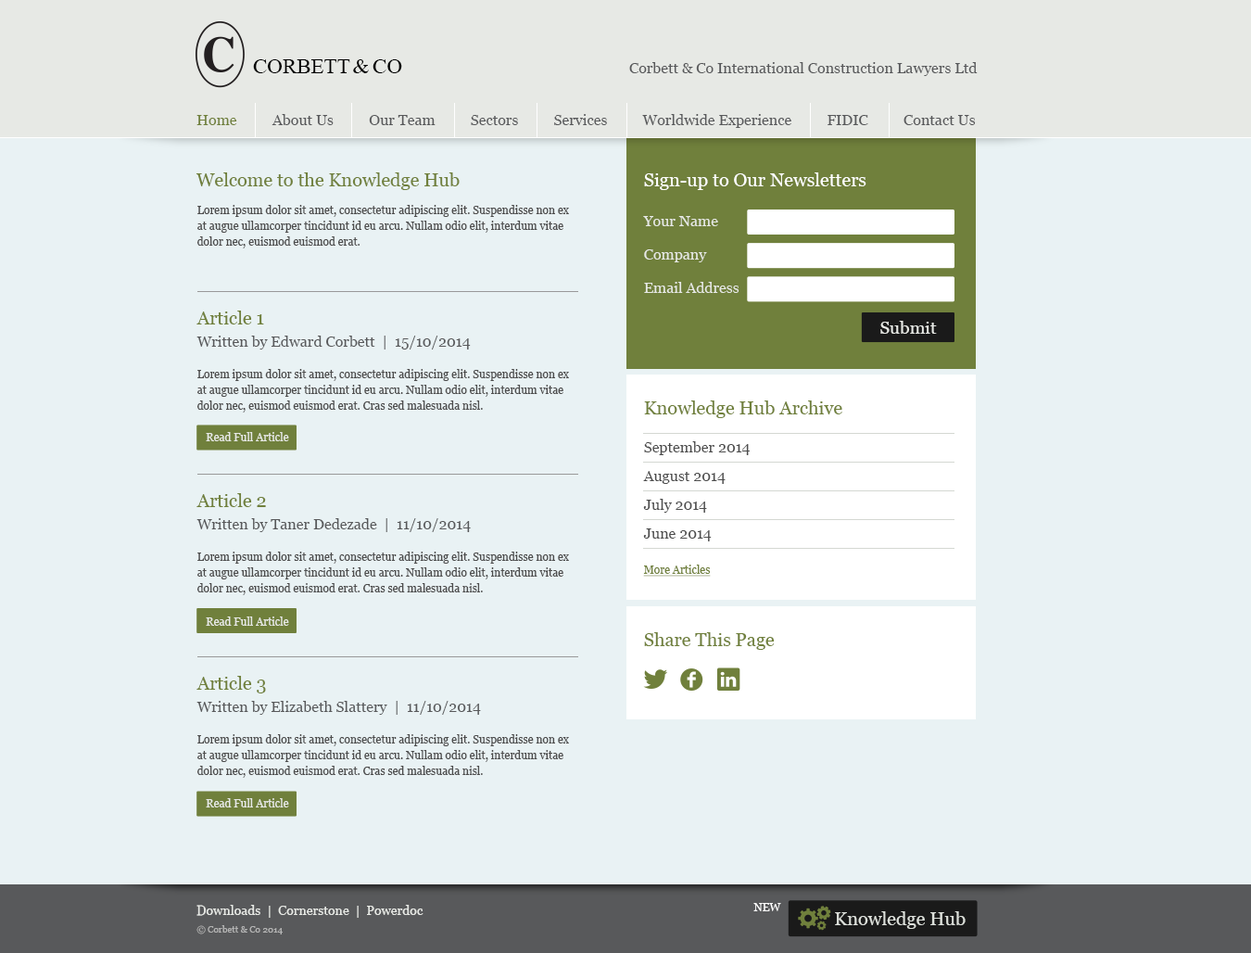
<style>
.page{position:relative;width:1251px;height:953px;background:#e9f2f4}
.page>*{position:absolute;margin:0}
.t1{font:21.3px "TimesNewRomanPSMT";color:#000000}
.t2{font:14.8px "Georgia";color:#58595b}
.t3{font:14.8px "Georgia";color:#70803c}
.t4{font:18.5px "Georgia";color:#70803c}
.t5{font:18.5px "Georgia";color:#ffffff}
.t6{font:11.1px/15.8px "Georgia";color:#4d4d4d}
.t7{font:14.8px/33.4px "Georgia";color:#e7e9e5}
.t8{font:17.6px "Georgia";color:#e7e9e5}
.t9{font:14.8px/28.7px "Georgia";color:#4d4d4d}
.t10{font:11.1px/15.8px "Georgia";color:#70803c;text-decoration:underline}
.t11{font:11.1px "Georgia";color:#e7e9e5}
.t12{font:13px "Georgia";color:#e7e9e5}
.t13{font:11.1px "Georgia";color:#ffffff}
.t14{font:18.5px "Georgia";color:#dde0db}
.t15{font:9.3px "Georgia";color:#b3b3b3}
</style>
<div class="page">
<p class="t1" style="left:253px;top:59px;width:149px;height:14px">CORBETT &amp; CO</p>
<p class="t2" style="left:629px;top:62px;width:349px;height:14px">Corbett &amp; Co International Construction Lawyers Ltd</p>
<p class="t3" style="left:197px;top:115px;width:40px;height:10px">Home</p>
<p class="t2" style="left:272px;top:114px;width:62px;height:11px">About Us</p>
<p class="t2" style="left:369px;top:115px;width:67px;height:10px">Our Team</p>
<p class="t2" style="left:471px;top:115px;width:47px;height:10px">Sectors</p>
<p class="t2" style="left:554px;top:114px;width:53px;height:11px">Services</p>
<p class="t2" style="left:642px;top:114px;width:150px;height:14px">Worldwide Experience</p>
<p class="t2" style="left:828px;top:115px;width:41px;height:10px">FIDIC</p>
<p class="t2" style="left:904px;top:115px;width:72px;height:10px">Contact Us</p>
<p class="t4" style="left:196px;top:172px;width:264px;height:18px">Welcome to the Knowledge Hub</p>
<p class="t5" style="left:644px;top:172px;width:223px;height:18px">Sign-up to Our Newsletters</p>
<p class="t6" style="left:197px;top:205px;width:372px;height:43px">Lorem ipsum dolor sit amet, consectetur adipiscing elit. Suspendisse non ex at augue ullamcorper tincidunt id eu arcu. Nullam odio elit, interdum vitae dolor nec, euismod euismod erat.</p>
<p class="t7" style="left:643px;top:216px;width:97px;height:77px">Your Name<br>Company<br>Email Address</p>
<p class="t6" style="left:197px;top:311px;width:372px;height:101px"><span class="t4">Article 1<br></span><span class="t2">Written by Edward Corbett  |  15/10/2014<br></span><br>Lorem ipsum dolor sit amet, consectetur adipiscing elit. Suspendisse non ex at augue ullamcorper tincidunt id eu arcu. Nullam odio elit, interdum vitae dolor nec, euismod euismod erat. Cras sed malesuada nisl.</p>
<p class="t8" style="left:881px;top:321px;width:56px;height:13px">Submit</p>
<p class="t9" style="left:643px;top:400px;width:200px;height:177px"><span class="t4">Knowledge Hub Archive<br></span>September 2014<br>August 2014<br>July 2014<br>June 2014<br><br><span class="t10">More Articles</span></p>
<p class="t11" style="left:206px;top:432px;width:83px;height:9px">Read Full Article</p>
<p class="t6" style="left:197px;top:493px;width:372px;height:102px"><span class="t4">Article 2<br></span><span class="t2">Written by Taner Dedezade  |  11/10/2014<br></span><br>Lorem ipsum dolor sit amet, consectetur adipiscing elit. Suspendisse non ex at augue ullamcorper tincidunt id eu arcu. Nullam odio elit, interdum vitae dolor nec, euismod euismod erat. Cras sed malesuada nisl.</p>
<p class="t11" style="left:206px;top:616px;width:83px;height:10px">Read Full Article</p>
<p class="t4" style="left:644px;top:632px;width:131px;height:18px">Share This Page</p>
<p class="t6" style="left:197px;top:676px;width:372px;height:102px"><span class="t4">Article 3<br></span><span class="t2">Written by Elizabeth Slattery  |  11/10/2014<br></span><br>Lorem ipsum dolor sit amet, consectetur adipiscing elit. Suspendisse non ex at augue ullamcorper tincidunt id eu arcu. Nullam odio elit, interdum vitae dolor nec, euismod euismod erat. Cras sed malesuada nisl.</p>
<p class="t11" style="left:206px;top:798px;width:83px;height:9px">Read Full Article</p>
<p class="t12" style="left:197px;top:905px;width:227px;height:13px">Downloads  |  Cornerstone  |  Powerdoc</p>
<p class="t13" style="left:754px;top:903px;width:27px;height:8px">NEW</p>
<p class="t14" style="left:835px;top:911px;width:131px;height:18px">Knowledge Hub</p>
<p class="t15" style="left:197px;top:925px;width:86px;height:9px">© Corbett &amp; Co 2014</p>
</div>
